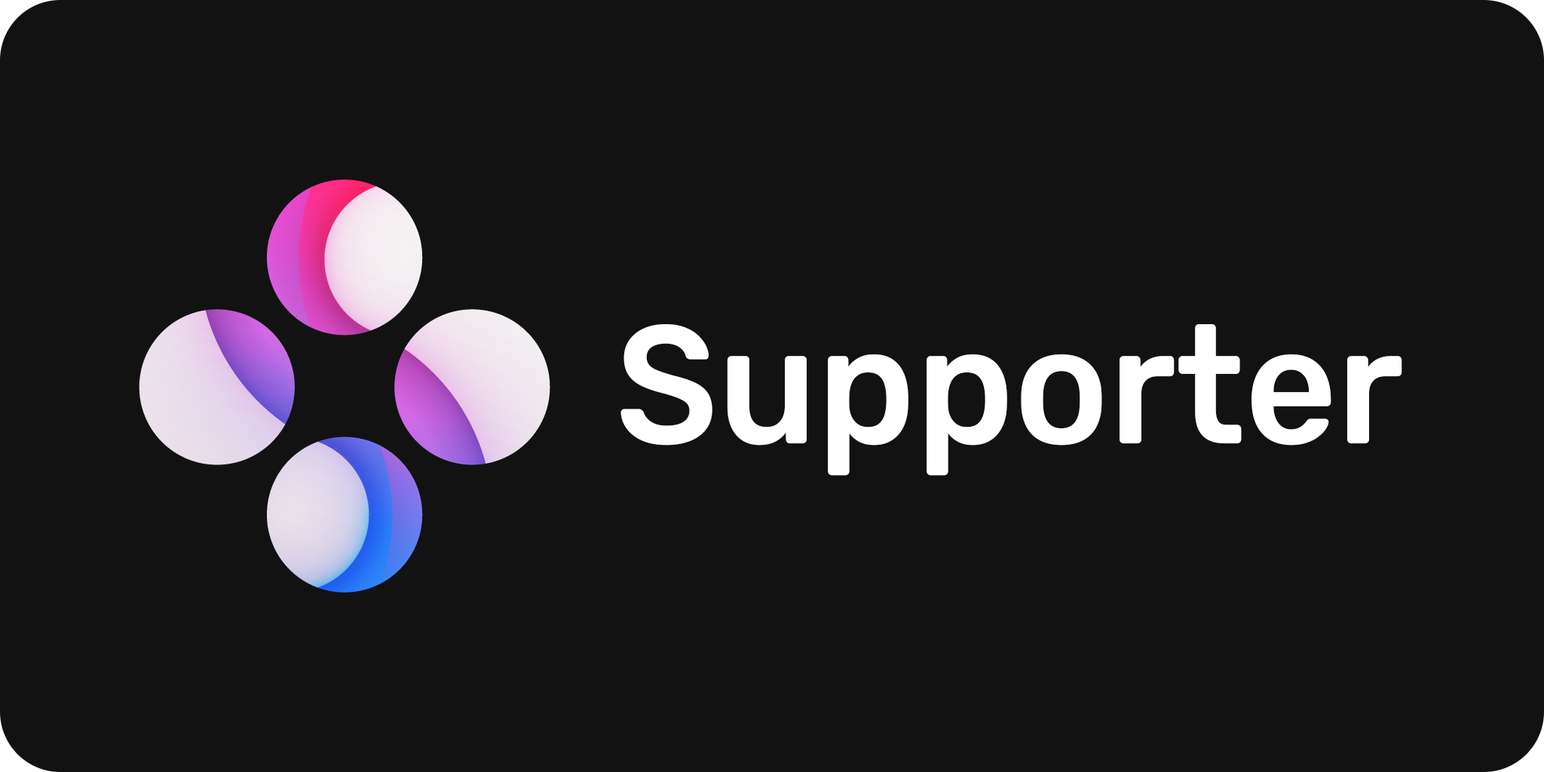
<style>
.page{position:relative;width:1544px;height:772px;background:#121212}
.page>*{position:absolute;margin:0}
.t1{font:167.7px "RubikRoman-Medium";color:#ffffff;scale:0.96 1}
</style>
<div class="page">
<p class="t1" style="left:621px;top:324px;width:782px;height:152px">Supporter</p>
</div>
